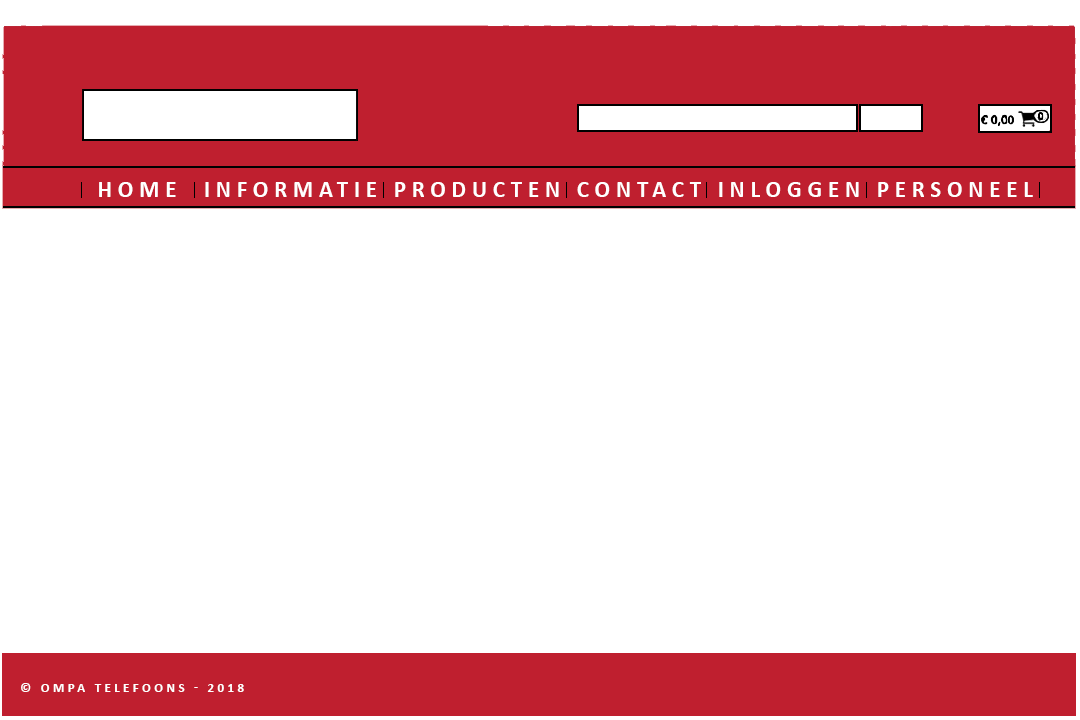
<style>
.page{position:relative;width:1080px;height:720px;background:#ffffff}
.page>*{position:absolute;margin:0}
.t1{font:23.3px "Calibri-Bold";letter-spacing:0.24em;color:#ffffff;text-transform:uppercase}
.t2{font:13.3px "Calibri-Bold";letter-spacing:0.24em;color:#ffffff;text-transform:uppercase}
</style>
<div class="page">
<p class="t1" style="left:99px;top:182px;width:934px;height:15px">home  INformatie Producten contact inloggen personeel</p>
<p class="t2" style="left:21px;top:683px;width:223px;height:9px">© OMpa telefoons - 2018</p>
</div>
